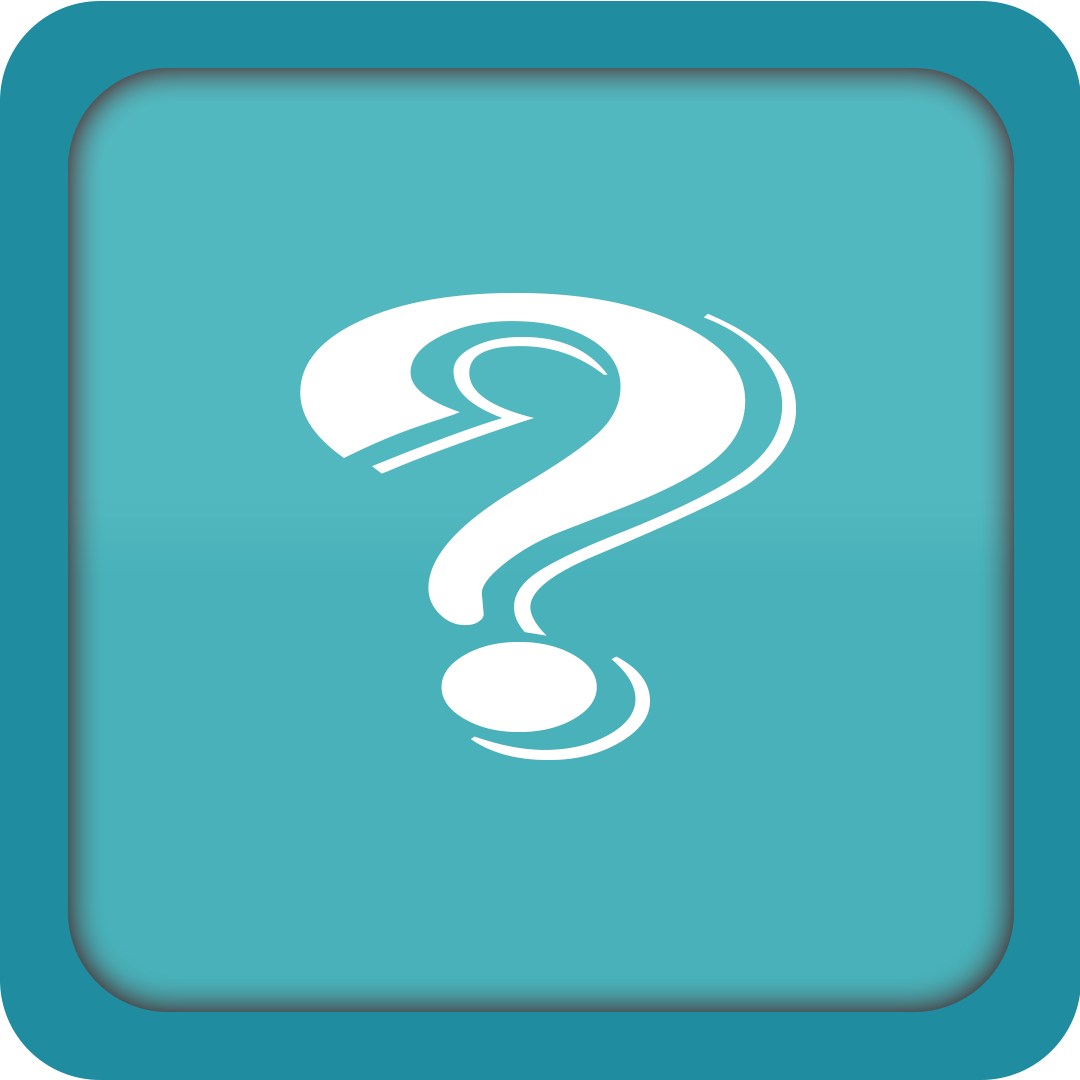
<style>
.page{position:relative;width:1080px;height:1080px;background:#48b1b9}
.page>*{position:absolute;margin:0}
.t1{font:709.6px "Algerian";color:#ffffff;scale:1.73 1}
</style>
<div class="page">
<p class="t1" style="left:300px;top:293px;width:496px;height:467px">?</p>
</div>
